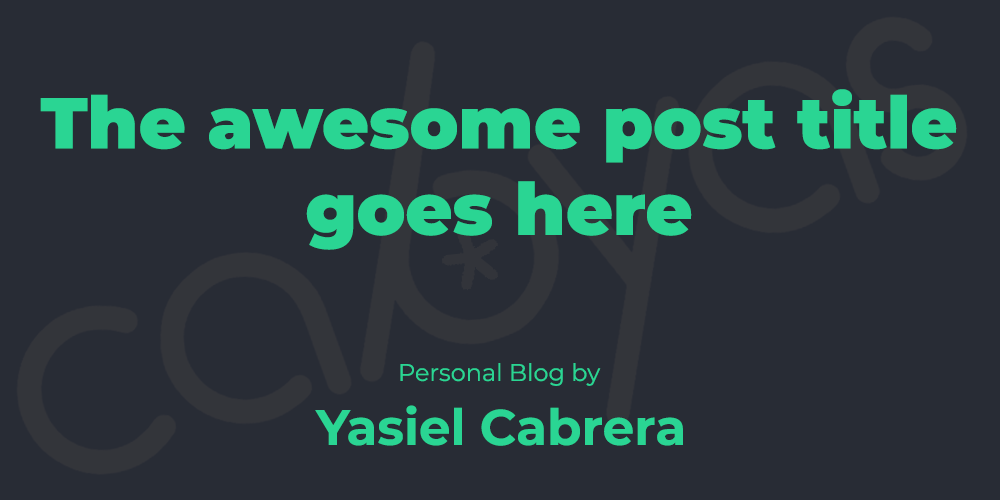
<style>
.page{position:relative;width:1000px;height:500px;background:#282c35}
.page>*{position:absolute;margin:0}
.t1{font:72px "Montserrat-Black";color:#2ad593}
.t2{font:24px "Montserrat-Regular";color:#2ad593}
.t3{font:50px "Montserrat-Bold";color:#2ad593}
</style>
<div class="page">
<p class="t1" style="left:40px;top:89px;width:917px;height:161px;text-align:center">The awesome post title goes here</p>
<p class="t2" style="left:400px;top:363px;width:201px;height:23px">Personal Blog by</p>
<p class="t3" style="left:315px;top:405px;width:368px;height:41px">Yasiel Cabrera</p>
</div>
